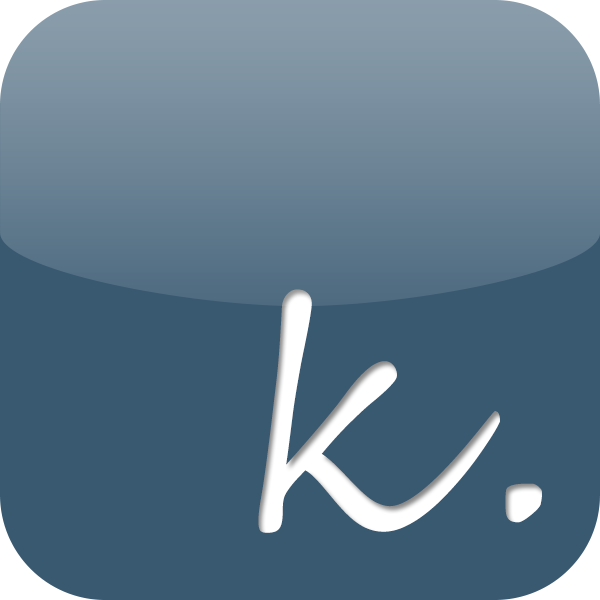
<style>
.page{position:relative;width:600px;height:600px;background:#395971}
.page>*{position:absolute;margin:0}
.t1{font:315.8px "SegoeScript";color:#ffffff}
</style>
<div class="page">
<p class="t1" style="left:258px;top:289px;width:284px;height:244px">k.</p>
</div>
